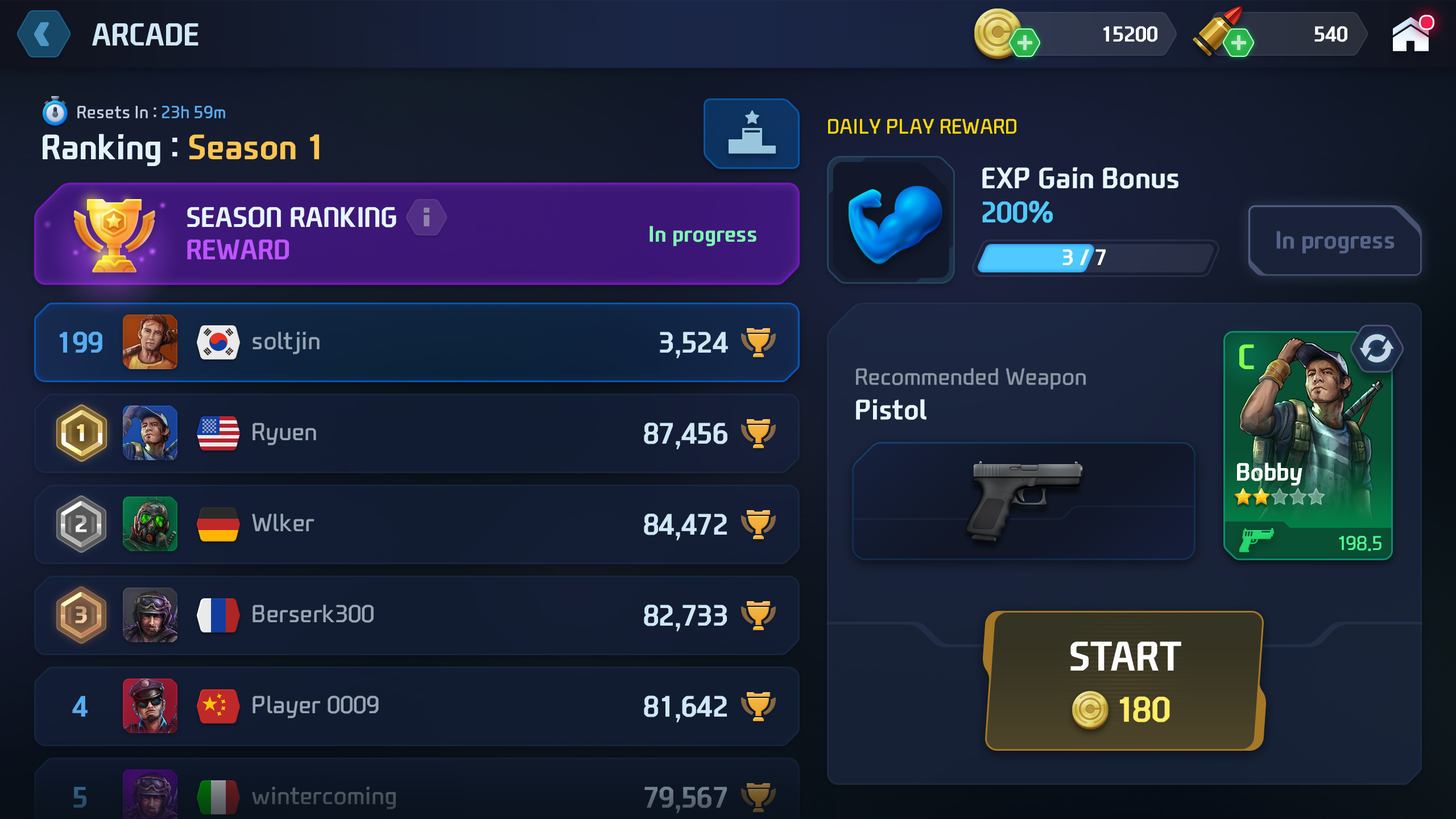
<style>
.page{position:relative;width:1456px;height:819px}
.page>*{position:absolute;margin:0}
.t1{font:30.6px "NEXONFootballGothicB";color:#cfe7f7;text-transform:uppercase}
.t2{font:20.7px "NEXONFootballGothicB";color:#ffffff;text-transform:uppercase}
.t3{font:17.1px "NEXONFootballGothicL";letter-spacing:-0.01em;color:#c3d0e7}
.t4{font:17.1px "NEXONFootballGothicL";letter-spacing:-0.01em;color:#56adf1}
.t5{font:20.5px "NEXONFootballGothicL";color:#ffd800;text-transform:uppercase}
.t6{font:34.1px "NEXONFootballGothicB";color:#e2f4ff}
.t7{font:34.1px "NEXONFootballGothicB";color:#ffc451}
.t8{font:28.4px "NEXONFootballGothicB";color:#e6f6ff}
.t9{font:28.4px "NEXONFootballGothicB";color:#4fc9fe}
.t10{font:27.3px "NEXONFootballGothicB";color:#e6f6ff;text-transform:uppercase}
.t11{font:27.3px "NEXONFootballGothicB";color:#bd54ff;text-transform:uppercase}
.t12{font:21.6px "NEXONFootballGothicB";color:#7effb1}
.t13{font:23.9px "NEXONFootballGothicB";color:#556387}
.t14{font:21.6px "NEXONFootballGothicB";color:#ffffff}
.t15{font:28.4px/91px "NEXONFootballGothicB";color:#56adf1}
.t16{font:23.9px/91px "NEXONFootballGothicL";color:#97a6b3}
.t17{font:28.4px/91px "NEXONFootballGothicB";color:#cfe7f7}
.t18{font:33.8px "NEXONFootballGothicB";letter-spacing:-0.02em;color:#85fc50;text-transform:uppercase}
.t19{font:22.7px "NEXONFootballGothicL";color:#8997a4}
.t20{font:27.3px "NEXONFootballGothicB";color:#e6f6ff}
.t21{font:24.2px "NEXONFootballGothicB";color:#ffffff}
.t22{font:19.3px "NEXONFootballGothicL";color:#50fc95}
.t23{font:39.8px "NEXONFootballGothicB";color:#ffffff;text-transform:uppercase}
.t24{font:34.1px "NEXONFootballGothicB";color:#ffec66;text-transform:uppercase}
</style>
<div class="page">
<p class="t1" style="left:92px;top:23px;width:106px;height:22px">Arcade</p>
<p class="t2" style="left:1103px;top:26px;width:54px;height:16px">15200</p>
<p class="t2" style="left:1314px;top:26px;width:33px;height:16px">540</p>
<p class="t3" style="left:77px;top:106px;width:148px;height:12px">Resets In : <span class="t4">23h 59m</span></p>
<p class="t5" style="left:828px;top:119px;width:188px;height:15px">Daily Play Reward</p>
<p class="t6" style="left:43px;top:134px;width:276px;height:32px">Ranking : <span class="t7">Season 1</span></p>
<p class="t8" style="left:982px;top:167px;width:196px;height:57px">EXP Gain Bonus<br><span class="t9">200%</span></p>
<p class="t10" style="left:187px;top:206px;width:209px;height:53px">Season Ranking<br><span class="t11">Reward</span></p>
<p class="t12" style="left:650px;top:226px;width:106px;height:20px">In progress</p>
<p class="t13" style="left:1276px;top:231px;width:119px;height:23px">In progress</p>
<p class="t14" style="left:1062px;top:249px;width:44px;height:16px">3 / 7</p>
<p class="t15" style="left:60px;top:332px;width:42px;height:476px;text-align:center">199<br><br><br><br>4<br>5</p>
<p class="t16" style="left:252px;top:332px;width:144px;height:477px">soltjin<br>Ryuen<br>Wlker<br>Berserk300<br>Player 0009<br>wintercoming</p>
<p class="t17" style="left:644px;top:332px;width:84px;height:481px;text-align:right">3,524<br>87,456<br>84,472<br>82,733<br>81,642<br>79,567</p>
<p class="t18" style="left:1239px;top:344px;width:15px;height:25px">C</p>
<p class="t19" style="left:856px;top:368px;width:230px;height:22px">Recommended Weapon</p>
<p class="t20" style="left:856px;top:399px;width:70px;height:21px">Pistol</p>
<p class="t21" style="left:1237px;top:462px;width:65px;height:24px">Bobby</p>
<p class="t22" style="left:1339px;top:536px;width:42px;height:15px">198.5</p>
<p class="t23" style="left:1070px;top:642px;width:111px;height:29px">Start</p>
<p class="t24" style="left:1120px;top:696px;width:50px;height:26px">180</p>
</div>
